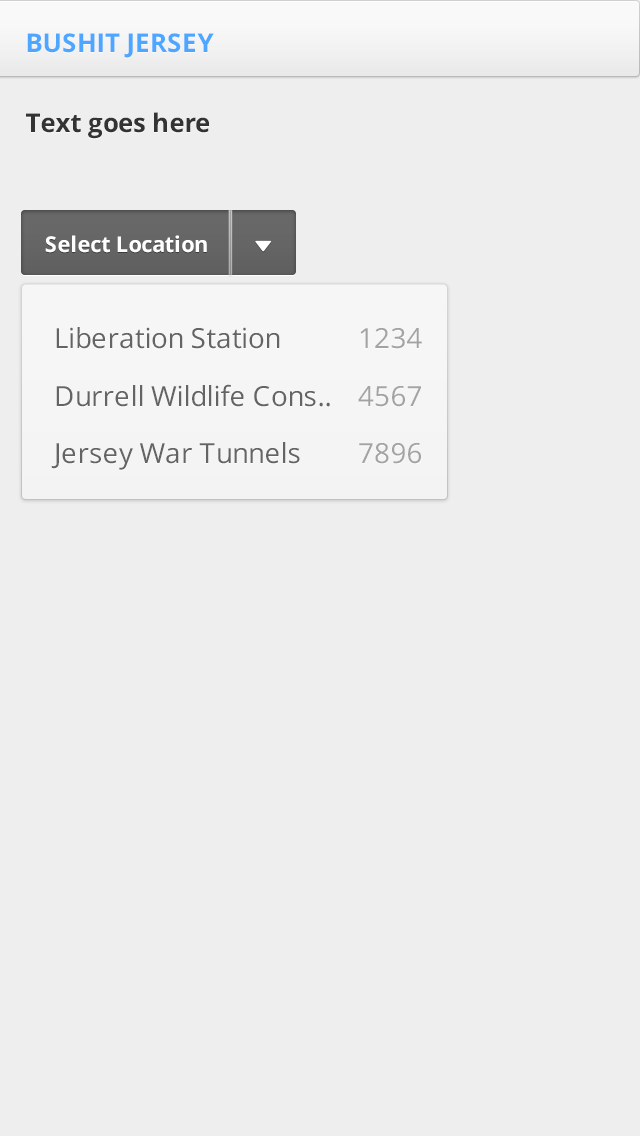
<style>
.page{position:relative;width:640px;height:1136px;background:#eeeeee}
.page>*{position:absolute;margin:0}
.t1{font:25.7px "OpenSans-Bold";color:#4da6ff}
.t2{font:25.7px "OpenSans-Bold";color:#333333}
.t3{font:21.7px "OpenSans-Bold";color:#ffffff}
.t4{font:27.6px/57.7px "OpenSans";color:#646464}
.t5{font:27.6px/57.7px "OpenSans";color:#a3a3a3}
</style>
<div class="page">
<p class="t1" style="left:27px;top:33px;width:187px;height:25px">BUSHIT JERSEY</p>
<p class="t2" style="left:26px;top:112px;width:183px;height:27px">Text goes here</p>
<p class="t3" style="left:45px;top:235px;width:162px;height:18px">Select Location</p>
<p class="t4" style="left:51px;top:327px;width:279px;height:143px">Liberation Station<br>Durrell Wildlife Cons.. <br>Jersey War Tunnels</p>
<p class="t5" style="left:358px;top:328px;width:64px;height:136px">1234<br>4567<br>7896</p>
</div>
